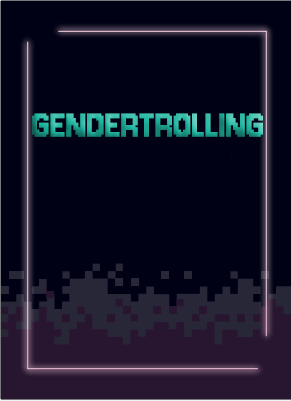
<style>
.page{position:relative;width:291px;height:401px;background:#000115}
.page>*{position:absolute;margin:0}
.t1{font:43.3px "Jersey10-Regular"}
</style>
<div class="page">
<p class="t1" style="left:32px;top:113px;width:231px;height:24px">GENDERTROLLING</p>
</div>
